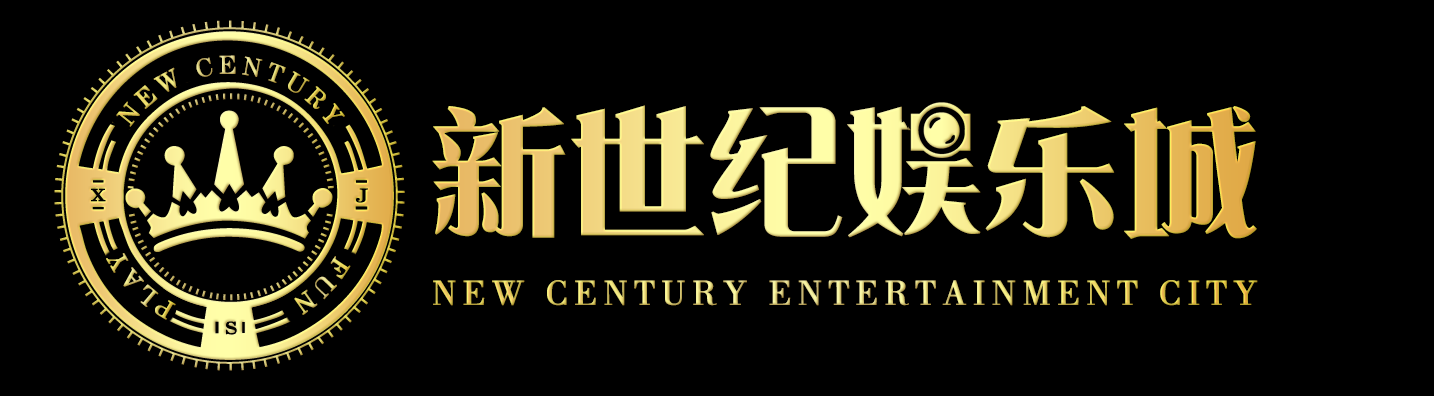
<style>
.page{position:relative;width:1434px;height:396px;background:#000000}
.page>*{position:absolute;margin:0}
.t1{font:26px/24px "FZSHFW--GB1-0";letter-spacing:0.16em;font-weight:bold}
.t2{font:140px "DFPYaSongW9";letter-spacing:-0.04em;font-weight:bold}
.t3{font:26px "FZSHFW--GB1-0";letter-spacing:0.16em;font-weight:bold}
.t4{font:36px "FZSS_GBK";letter-spacing:0.14em;text-transform:uppercase;font-weight:bold}
</style>
<div class="page">
<p class="t1" style="left:116px;top:55px;width:229px;height:72px;text-align:center">NEW CENTURY</p>
<p class="t2" style="left:432px;top:105px;width:825px;height:134px">新世纪娱乐城</p>
<p class="t3" style="left:106px;top:253px;width:70px;height:67px;rotate:2deg">PLAY</p>
<p class="t3" style="left:294px;top:256px;width:57px;height:59px;rotate:2deg">FUN</p>
<p class="t4" style="left:433px;top:280px;width:825px;height:26px">New Century Entertainment City</p>
</div>
